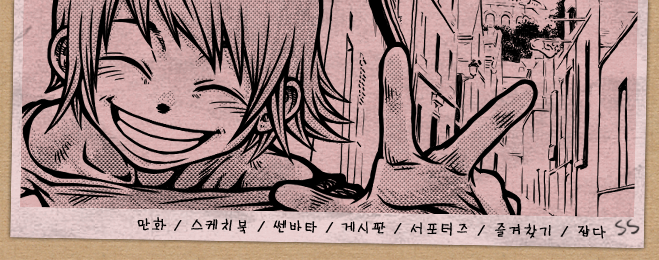
<style>
.page{position:relative;width:659px;height:260px}
.page>*{position:absolute;margin:0}
.t1{font:18px "YDSDJ";letter-spacing:0.01em;color:#000000;font-weight:bold}
</style>
<div class="page">
<p class="t1" style="left:137px;top:217px;width:469px;height:22px;rotate:1deg">만화 / 스케치북 / 쎈바타 / 게시판 / 서포터즈 / 즐겨찾기 / 잡다</p>
</div>
